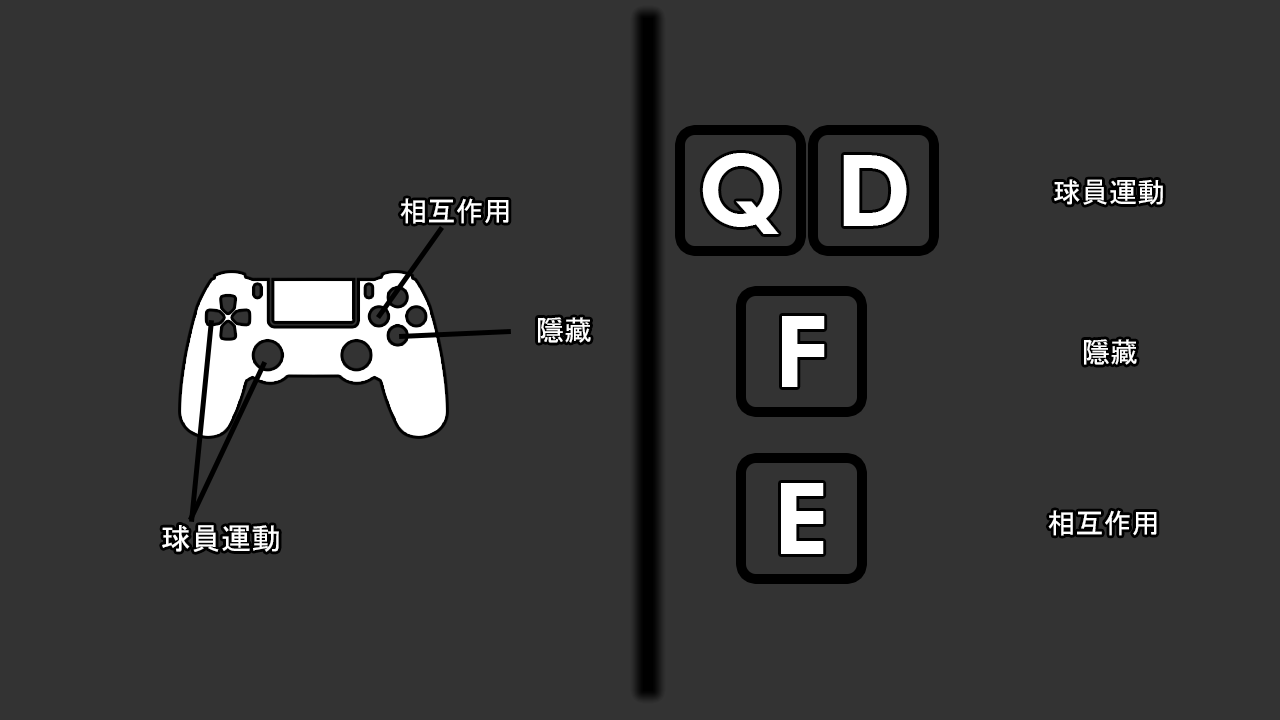
<style>
.page{position:relative;width:1280px;height:720px;background:#333333}
.page>*{position:absolute;margin:0}
.t1{font:100px "FuturaBT-Heavy";color:#ffffff}
.t2{font:28px "MS-Gothic";color:#ffffff}
.t3{font:30px "MS-Gothic";color:#ffffff}
</style>
<div class="page">
<p class="t1" style="left:702px;top:153px;width:78px;height:81px">Q</p>
<p class="t1" style="left:843px;top:155px;width:64px;height:71px">D</p>
<p class="t2" style="left:1054px;top:179px;width:109px;height:26px">球員運動</p>
<p class="t2" style="left:400px;top:198px;width:109px;height:26px">相互作用</p>
<p class="t2" style="left:538px;top:317px;width:53px;height:26px">隱藏</p>
<p class="t1" style="left:782px;top:316px;width:43px;height:71px">F</p>
<p class="t2" style="left:1084px;top:339px;width:53px;height:26px">隱藏</p>
<p class="t1" style="left:781px;top:483px;width:43px;height:71px">E</p>
<p class="t2" style="left:1048px;top:510px;width:109px;height:26px">相互作用</p>
<p class="t3" style="left:162px;top:525px;width:117px;height:27px">球員運動</p>
</div>
